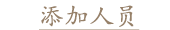
<style>
.page{position:relative;width:170px;height:30px;background:#ffffff}
.page>*{position:absolute;margin:0}
.t1{font:25px "AdobeKaitiStd-Regular";color:#978169;text-decoration:underline}
</style>
<div class="page">
<p class="t1" style="left:39px;top:5px;width:101px;height:26px">添加人员</p>
</div>
